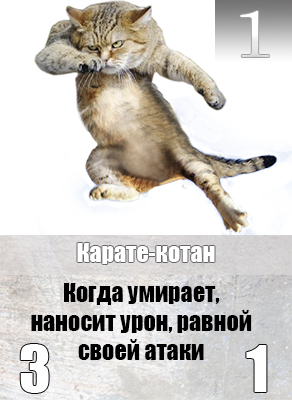
<style>
.page{position:relative;width:292px;height:400px;background:#ffffff}
.page>*{position:absolute;margin:0}
.t1{font:65.6px "Century";color:#ffffff;scale:1.18 1}
.t2{font:24px "Impact";color:#ffffff}
.t3{font:24px "Impact";color:#000000}
</style>
<div class="page">
<p class="t1" style="left:240px;top:11px;width:29px;height:46px">1</p>
<p class="t2" style="left:77px;top:243px;width:138px;height:21px">Карате-котан</p>
<p class="t3" style="left:31px;top:283px;width:221px;height:77px;text-align:center">Когда умирает, наносит урон, равной своей атаки</p>
</div>
